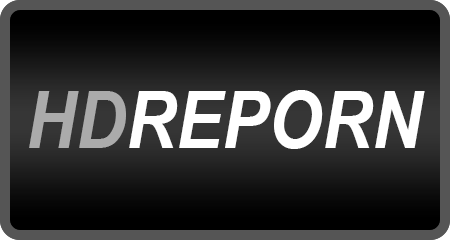
<style>
.page{position:relative;width:450px;height:240px}
.page>*{position:absolute;margin:0}
.t1{font:78.6px "Arial-BoldItalicMT";color:#ffffff;scale:0.88 1}
.t2{font:78.6px "Arial-BoldItalicMT";color:#ababab;scale:0.88 1}
</style>
<div class="page">
<p class="t1" style="left:29px;top:90px;width:396px;height:59px"><span class="t2">HD</span>REPORN</p>
</div>
